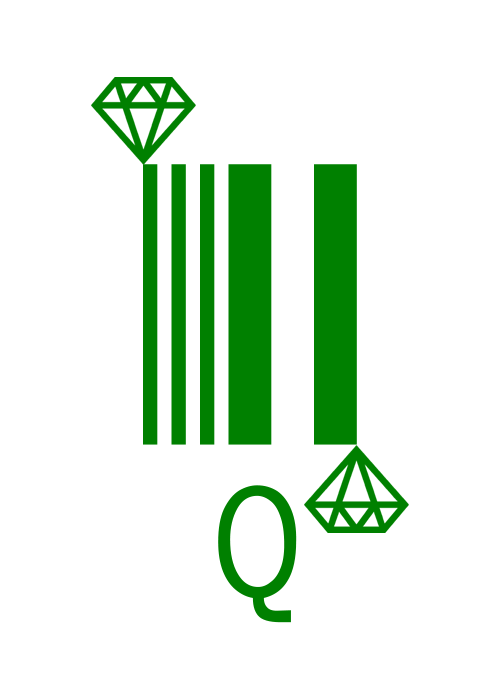
<style>
.page{position:relative;width:500px;height:700px;background:#ffffff}
.page>*{position:absolute;margin:0}
.t1{font:475.3px "LibreBarcode39ExtendedText-Regular";color:#008000}
</style>
<div class="page">
<p class="t1" style="left:143px;top:164px;width:214px;height:459px">Q</p>
</div>
